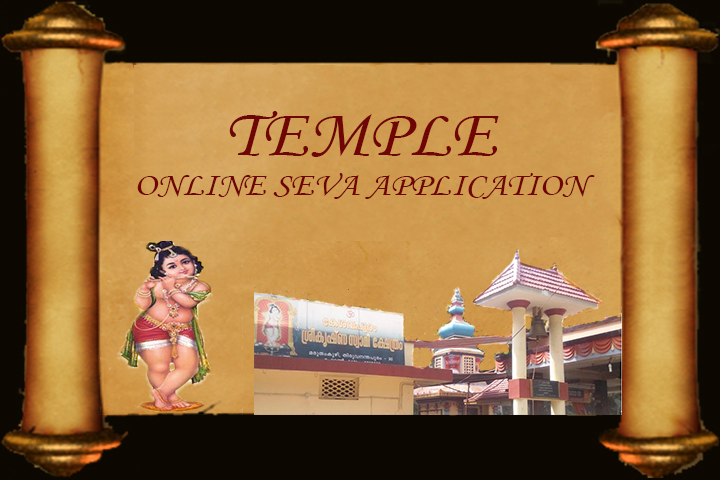
<style>
.page{position:relative;width:720px;height:480px;background:#0c0701}
.page>*{position:absolute;margin:0}
.t1{font:33.3px "MonotypeCorsiva";color:#6f0505;scale:1.1 1}
.t2{font:66.7px "MonotypeCorsiva";color:#6f0505;scale:1.1 1}
</style>
<div class="page">
<p class="t1" style="left:137px;top:111px;width:458px;height:88px;text-align:center"><span class="t2">TEMPLE <br></span>ONLINE SEVA APPLICATION</p>
</div>
